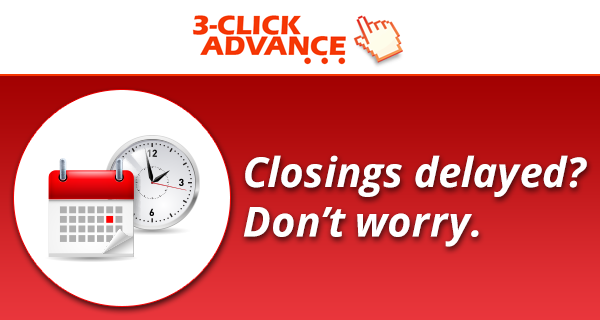
<style>
.page{position:relative;width:600px;height:320px;background:#ffffff}
.page>*{position:absolute;margin:0}
.t1{font:41.3px "OpenSans-BoldItalic";color:#ffffff}
</style>
<div class="page">
<p class="t1" style="left:243px;top:155px;width:344px;height:92px">Closings delayed?<br>Don’t worry.</p>
</div>
